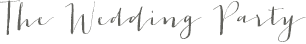
<style>
.page{position:relative;width:306px;height:44px;background:#ffffff}
.page>*{position:absolute;margin:0}
.t1{font:30px "JacquesGilles";color:#62625d}
</style>
<div class="page">
<p class="t1" style="left:0px;top:0px;width:306px;height:42px">The Wedding Party</p>
</div>
